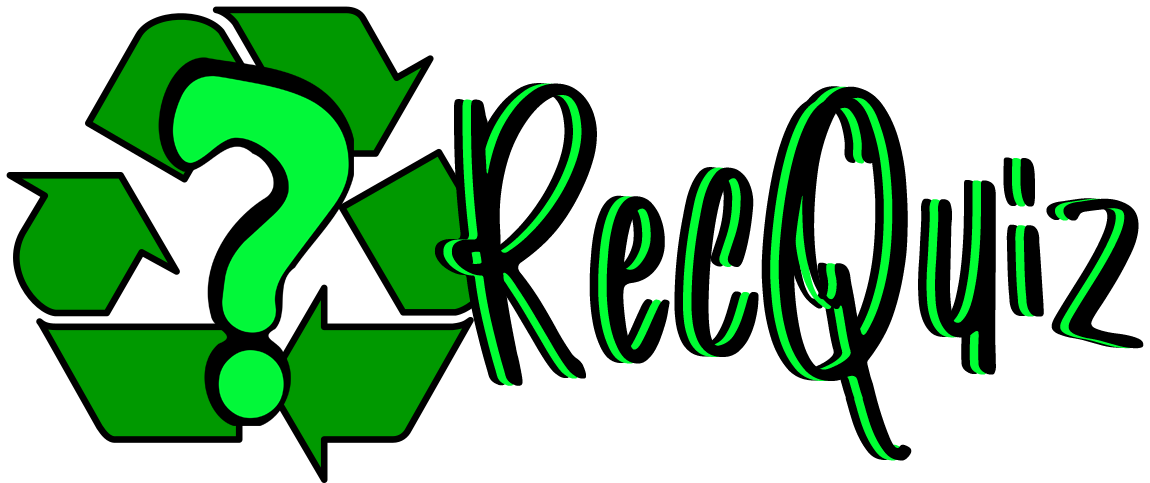
<style>
.page{position:relative;width:1150px;height:483px;background:#ffffff}
.page>*{position:absolute;margin:0}
.t1{font:400px "Romantick"}
.t2{font:400px "Romantick";color:#000000}
</style>
<div class="page">
<p class="t1" style="left:434px;top:83px;width:693px;height:377px">RecQuiz</p>
<p class="t1" style="left:443px;top:83px;width:692px;height:378px">RecQuiz</p>
<p class="t2" style="left:451px;top:83px;width:693px;height:378px">RecQuiz</p>
</div>
